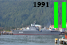
<style>
.page{position:relative;width:67px;height:45px}
.page>*{position:absolute;margin:0}
.t1{font:10.3px "Aparajita-Bold";color:#000000}
</style>
<div class="page">
<p class="t1" style="left:33px;top:2px;width:16px;height:5px">1991</p>
</div>
